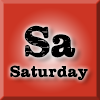
<style>
.page{position:relative;width:100px;height:100px;background:#cc3524}
.page>*{position:absolute;margin:0}
.t1{font:44px "Plateaux";color:#000000;scale:0.94 1}
.t2{font:16px "Plateaux";color:#000000;scale:1.04 1}
</style>
<div class="page">
<p class="t1" style="left:24px;top:25px;width:52px;height:33px">Sa</p>
<p class="t2" style="left:10px;top:65px;width:78px;height:15px">Saturday</p>
</div>
